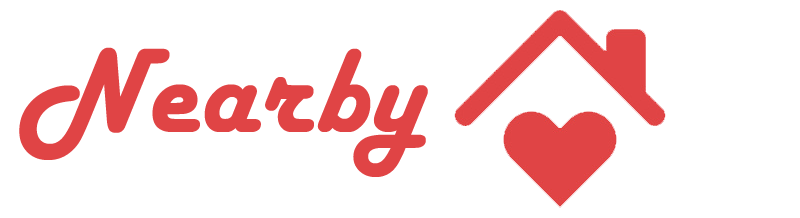
<style>
.page{position:relative;width:800px;height:218px;background:#ffffff}
.page>*{position:absolute;margin:0}
.t1{font:125px "HarlowSolid";letter-spacing:0.02em;color:#e04445}
</style>
<div class="page">
<p class="t1" style="left:19px;top:47px;width:409px;height:130px">Nearby</p>
</div>
